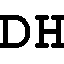
<style>
.page{position:relative;width:64px;height:64px;background:#ffffff}
.page>*{position:absolute;margin:0}
.t1{font:56px "CourierNewPS-BoldMT";color:#000000}
</style>
<div class="page">
<p class="t1" style="left:0px;top:15px;width:65px;height:33px">DH</p>
</div>
